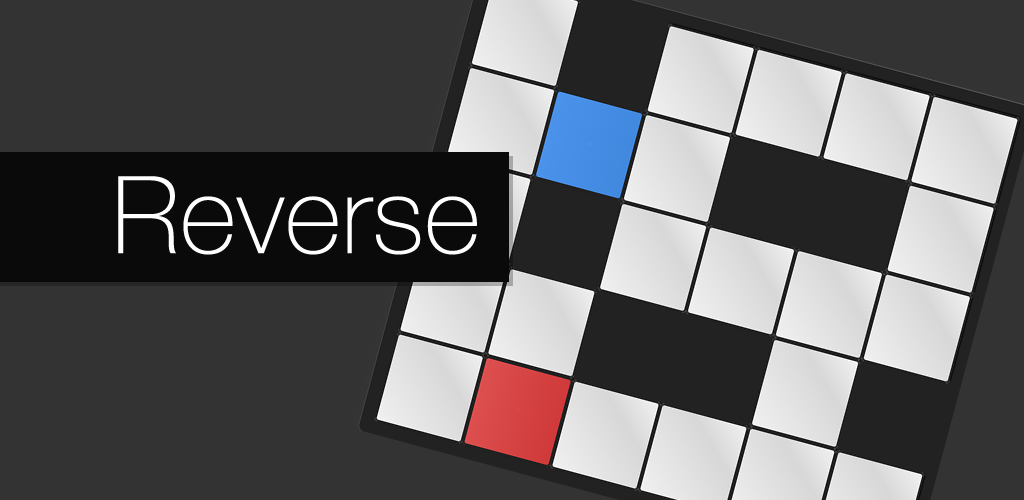
<style>
.page{position:relative;width:1024px;height:500px;background:#333333}
.page>*{position:absolute;margin:0}
.t1{font:107.9px "HelveticaNeueLTStd-Th";letter-spacing:0.005em;color:#ffffff}
</style>
<div class="page">
<p class="t1" style="left:118px;top:176px;width:359px;height:79px">Reverse</p>
</div>
